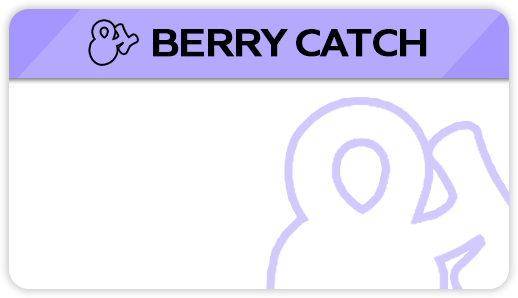
<style>
.page{position:relative;width:518px;height:298px;background:#ffffff}
.page>*{position:absolute;margin:0}
.t1{font:40.9px "QuietSans-SemiBold";letter-spacing:-0.025em;color:#000000;font-weight:bold;scale:1.05 1}
</style>
<div class="page">
<p class="t1" style="left:153px;top:29px;width:274px;height:28px">BERRY CATCH</p>
</div>
